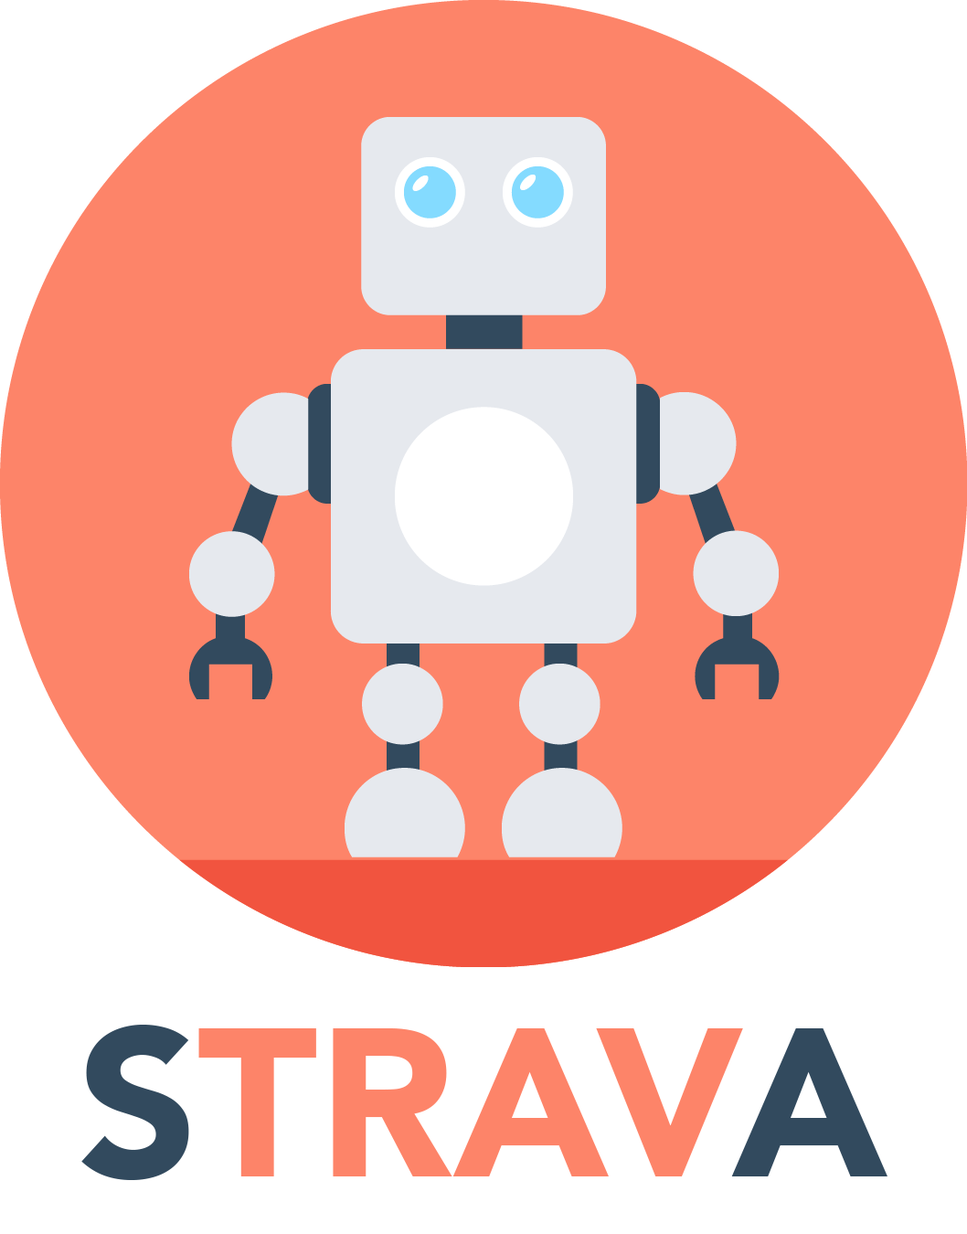
<style>
.page{position:relative;width:967px;height:1234px;background:#fd8469}
.page>*{position:absolute;margin:0}
.t1{font:209.4px "Avenir-Black";color:#fd8469;text-transform:uppercase}
.t2{font:209.4px "Avenir-Black";color:#324a5e;text-transform:uppercase}
</style>
<div class="page">
<p class="t1" style="left:81px;top:1024px;width:806px;height:156px"><span class="t2">S</span>trav<span class="t2">a</span></p>
</div>
